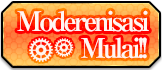
<style>
.page{position:relative;width:162px;height:70px}
.page>*{position:absolute;margin:0}
.t1{font:27px "RyuminPro-ExBold";letter-spacing:-0.12em;color:#fff6f2}
</style>
<div class="page">
<p class="t1" style="left:17px;top:10px;width:132px;height:22px">Moderenisasi</p>
<p class="t1" style="left:81px;top:37px;width:66px;height:22px">Mulai!!</p>
</div>
